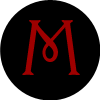
<style>
.page{position:relative;width:100px;height:100px;background:#000000}
.page>*{position:absolute;margin:0}
.t1{font:80px "Harrington";color:#9e0000}
</style>
<div class="page">
<p class="t1" style="left:22px;top:20px;width:58px;height:55px">M</p>
</div>
